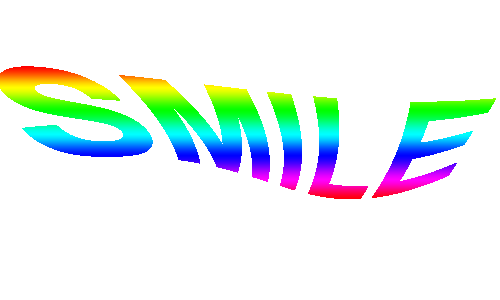
<style>
.page{position:relative;width:500px;height:300px;background:#ffffff}
.page>*{position:absolute;margin:0}
.t1{font:119.1px "Arial-BoldMT"}
</style>
<div class="page">
<p class="t1" style="left:0px;top:66px;width:496px;height:133px">SMILE</p>
</div>
